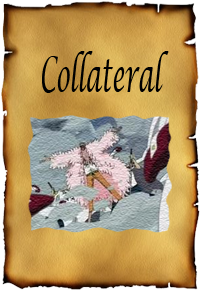
<style>
.page{position:relative;width:200px;height:290px}
.page>*{position:absolute;margin:0}
.t1{font:48px "LucidaCalligraphy-Italic";color:#000000;scale:0.49 1}
</style>
<div class="page">
<p class="t1" style="left:42px;top:51px;width:127px;height:42px">Collateral</p>
</div>
